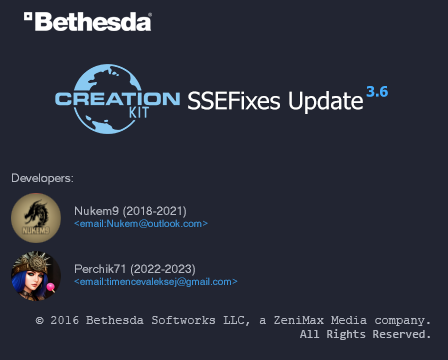
<style>
.page{position:relative;width:448px;height:360px;background:#222532}
.page>*{position:absolute;margin:0}
.t1{font:14px "Tahoma-Bold";color:#44adfe}
.t2{font:24px "Tahoma";color:#ffffff}
.t3{font:12px "MS Sans Serif";color:#b4b8c3}
.t4{font:10px "MS Sans Serif";color:#3c93d7}
.t5{font:12px "CourierNewPSMT";color:#b4b8c3}
.t6{font:12px "Consolas";color:#b4b8c3}
</style>
<div class="page">
<p class="t1" style="left:366px;top:86px;width:22px;height:11px">3.6</p>
<p class="t2" style="left:188px;top:91px;width:175px;height:23px">SSEFixes Update</p>
<p class="t3" style="left:12px;top:173px;width:61px;height:12px">Developers:</p>
<p class="t4" style="left:74px;top:206px;width:134px;height:22px;text-align:right"><span class="t3">Nukem9 (2018-2021)<br></span>&lt;email:Nukem@outlook.com&gt;</p>
<p class="t4" style="left:74px;top:264px;width:164px;height:23px;text-align:right"><span class="t3">Perchik71 (2022-2023)<br></span>&lt;email:timencevaleksej@gmail.com&gt;</p>
<p class="t5" style="left:35px;top:316px;width:395px;height:24px">© 2016 Bethesda Softworks LLC, a ZeniMax Media company.<span class="t6"><br>All Rights Reserved.</span></p>
</div>
